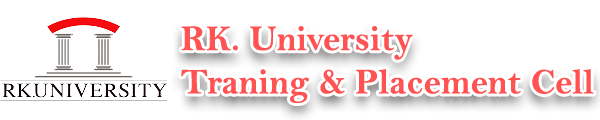
<style>
.page{position:relative;width:600px;height:120px;background:#ffffff}
.page>*{position:absolute;margin:0}
.t1{font:36.1px "BellMTBold";color:#ff5353}
</style>
<div class="page">
<p class="t1" style="left:181px;top:26px;width:413px;height:77px">RK. University<br>Traning &amp; Placement Cell</p>
</div>
